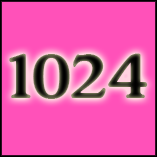
<style>
.page{position:relative;width:157px;height:157px;background:#ff51b9}
.page>*{position:absolute;margin:0}
.t1{font:68px "ARJULIAN"}
</style>
<div class="page">
<p class="t1" style="left:9px;top:53px;width:139px;height:46px">1024</p>
</div>
